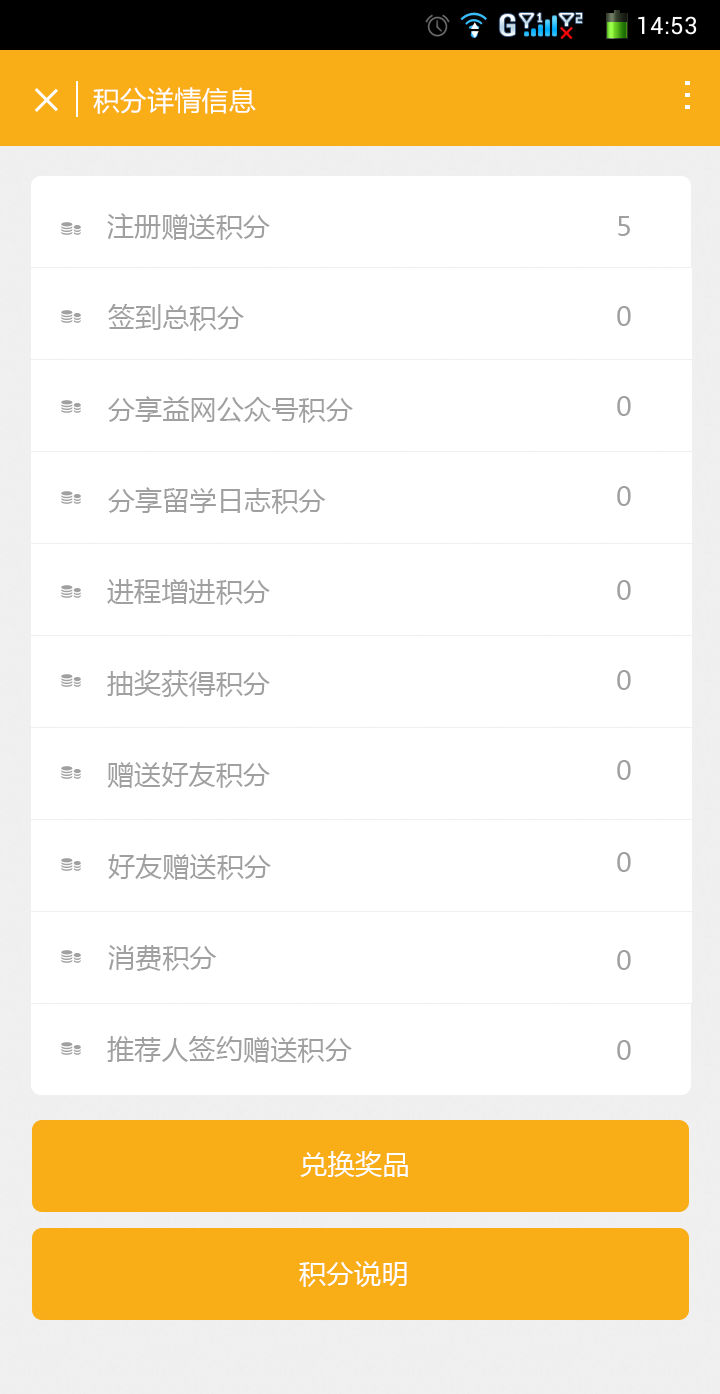
<style>
.page{position:relative;width:720px;height:1394px;background:#ffffff}
.page>*{position:absolute;margin:0}
.t1{font:27px "MicrosoftYaHei";letter-spacing:0.02em;color:#ffffff}
.t2{font:26.7px "MicrosoftYaHei";letter-spacing:0.02em;color:#a0a0a0}
</style>
<div class="page">
<p class="t1" style="left:93px;top:87px;width:163px;height:27px">积分详情信息</p>
<p class="t2" style="left:107px;top:213px;width:163px;height:27px">注册赠送积分</p>
<p class="t2" style="left:618px;top:216px;width:12px;height:20px">5</p>
<p class="t2" style="left:108px;top:304px;width:136px;height:27px">签到总积分</p>
<p class="t2" style="left:617px;top:306px;width:14px;height:20px">0</p>
<p class="t2" style="left:108px;top:396px;width:245px;height:27px">分享益网公众号积分</p>
<p class="t2" style="left:617px;top:396px;width:14px;height:20px">0</p>
<p class="t2" style="left:617px;top:486px;width:14px;height:20px">0</p>
<p class="t2" style="left:108px;top:487px;width:218px;height:27px">分享留学日志积分</p>
<p class="t2" style="left:107px;top:579px;width:163px;height:26px">进程增进积分</p>
<p class="t2" style="left:617px;top:580px;width:14px;height:20px">0</p>
<p class="t2" style="left:107px;top:670px;width:163px;height:27px">抽奖获得积分</p>
<p class="t2" style="left:617px;top:670px;width:14px;height:20px">0</p>
<p class="t2" style="left:617px;top:760px;width:14px;height:20px">0</p>
<p class="t2" style="left:107px;top:762px;width:163px;height:26px">赠送好友积分</p>
<p class="t2" style="left:108px;top:854px;width:163px;height:26px">好友赠送积分</p>
<p class="t2" style="left:617px;top:852px;width:14px;height:20px">0</p>
<p class="t2" style="left:108px;top:945px;width:109px;height:26px">消费积分</p>
<p class="t2" style="left:617px;top:950px;width:14px;height:20px">0</p>
<p class="t2" style="left:107px;top:1036px;width:245px;height:27px">推荐人签约赠送积分</p>
<p class="t2" style="left:617px;top:1040px;width:14px;height:20px">0</p>
<p class="t1" style="left:300px;top:1151px;width:108px;height:26px">兑换奖品</p>
<p class="t1" style="left:299px;top:1261px;width:108px;height:26px">积分说明</p>
</div>
